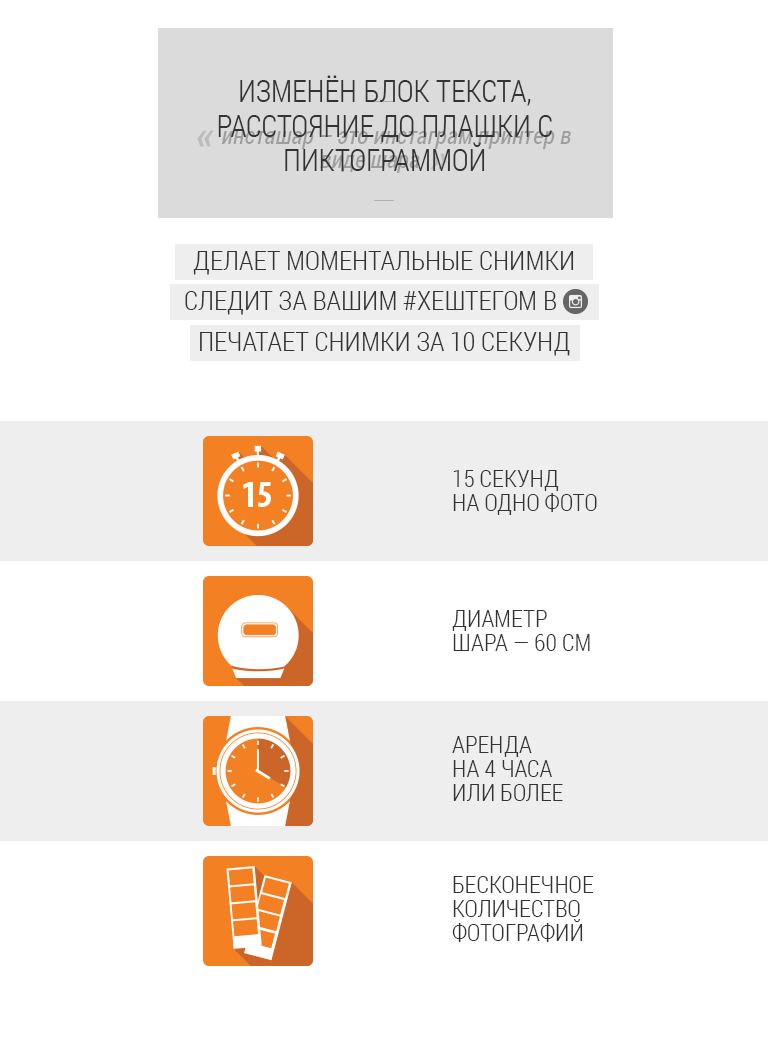
<style>
.page{position:relative;width:768px;height:1040px;background:#ffffff}
.page>*{position:absolute;margin:0}
.t1{font:30px/34.6px "RobotoCondensed-Light";color:#333333;text-transform:uppercase}
.t2{font:24px "RobotoCondensed-Italic";color:#333333}
.t3{font:40px "RobotoCondensed-BoldItalic";color:#999999}
.t4{font:27px/40.5px "RobotoCondensed-Light";color:#333333;text-transform:uppercase}
.t5{font:24px/24px "RobotoCondensed-Light";color:#333333;text-transform:uppercase}
</style>
<div class="page">
<p class="t1" style="left:218px;top:75px;width:334px;height:96px;text-align:center">изменён блок текста, расстояние до плашки с пиктограммой</p>
<p class="t2" style="left:197px;top:130px;width:374px;height:43px"><span class="t3">« </span>инсташар – это инстаграм принтер в виде шара  <span class="t3">»</span></p>
<p class="t4" style="left:185px;top:251px;width:389px;height:105px;text-align:center">ДЕЛАЕТ МОМЕНТАЛЬНЫЕ СНИМКИ<br>СЛЕДИТ ЗА ВАШИМ #ХЕШТЕГОМ В ПЕЧАТАЕТ СНИМКИ ЗА 10 СЕКУНД</p>
<p class="t5" style="left:453px;top:470px;width:144px;height:45px">15 секунд<br>на одно фото</p>
<p class="t5" style="left:452px;top:610px;width:138px;height:41px">диаметр<br>шара — 60 см</p>
<p class="t5" style="left:452px;top:736px;width:111px;height:65px">аренда<br>на 4 часа<br>или более</p>
<p class="t5" style="left:452px;top:876px;width:142px;height:66px">бесконечное количество фотографий</p>
</div>
